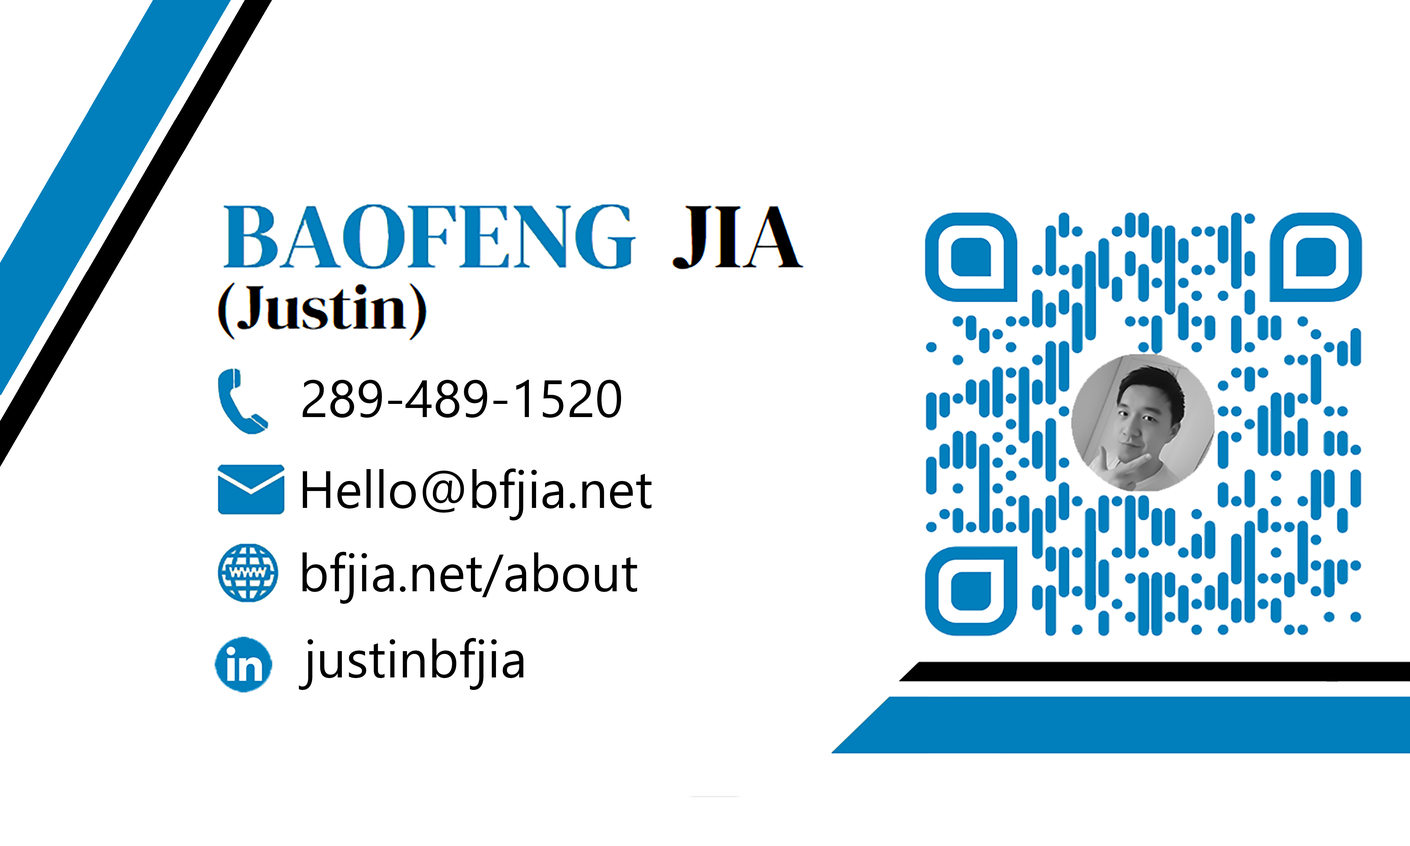
<style>
.page{position:relative;width:1410px;height:846px;background:#ffffff}
.page>*{position:absolute;margin:0}
.t1{font:52.2px "NirmalaUI";color:#000000}
</style>
<div class="page">
<p class="t1" style="left:302px;top:380px;width:319px;height:38px">289-489-1520</p>
<p class="t1" style="left:303px;top:468px;width:349px;height:52px">Hello@bfjia.net</p>
<p class="t1" style="left:302px;top:552px;width:335px;height:52px">bfjia.net/about</p>
<p class="t1" style="left:299px;top:638px;width:224px;height:52px">justinbfjia</p>
</div>
